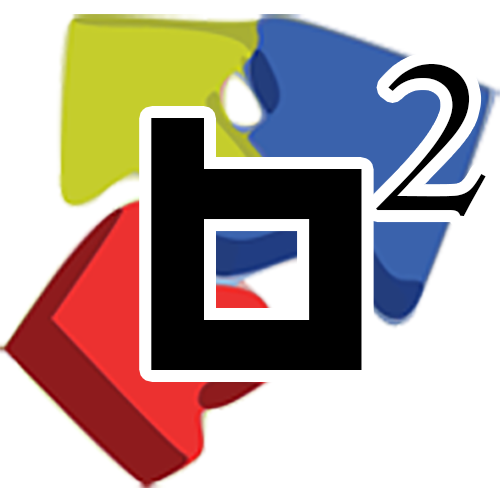
<style>
.page{position:relative;width:500px;height:500px;background:#ffffff}
.page>*{position:absolute;margin:0}
.t1{font:234.1px "Centaur";color:#000000}
.t2{font:251.9px "HappyKiller";color:#000000;scale:1.04 1}
</style>
<div class="page">
<p class="t1" style="left:376px;top:64px;width:110px;height:152px">2</p>
<p class="t2" style="left:151px;top:118px;width:211px;height:252px">b</p>
</div>
